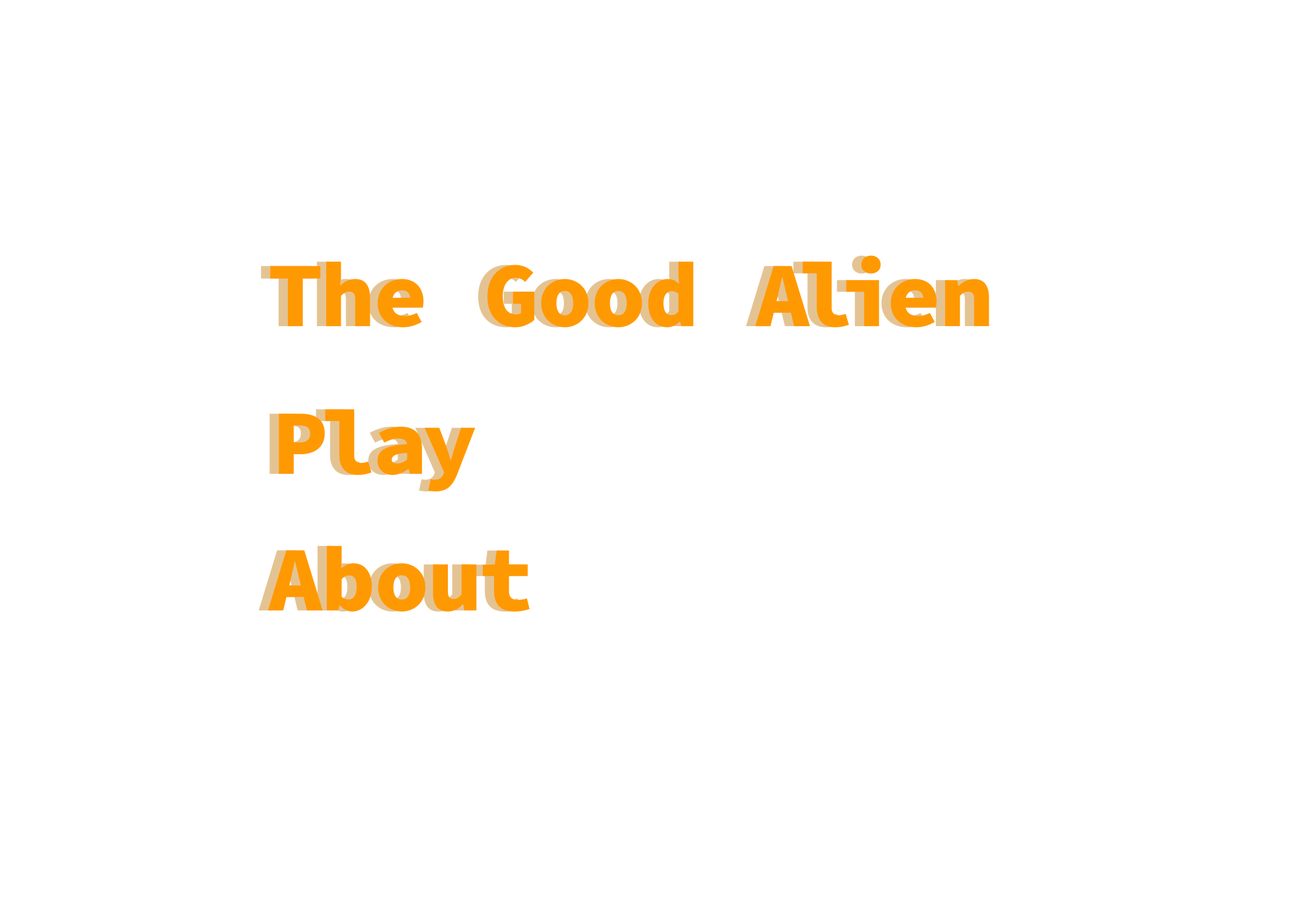
<style>
.page{position:relative;width:1292px;height:923px;background:#ffffff}
.page>*{position:absolute;margin:0}
.t1{font:92.3px "SourceCodeRoman_813.000wght"}
.t2{font:92.3px "SourceCodeRoman_813.000wght";color:#ff9901}
</style>
<div class="page">
<p class="t1" style="left:261px;top:255px;width:719px;height:72px">The Good Alien</p>
<p class="t2" style="left:270px;top:255px;width:719px;height:72px">The Good Alien</p>
<p class="t1" style="left:269px;top:409px;width:197px;height:83px">Play</p>
<p class="t2" style="left:279px;top:409px;width:197px;height:83px">Play</p>
<p class="t1" style="left:258px;top:546px;width:263px;height:66px">About</p>
<p class="t2" style="left:268px;top:546px;width:262px;height:66px">About</p>
</div>
